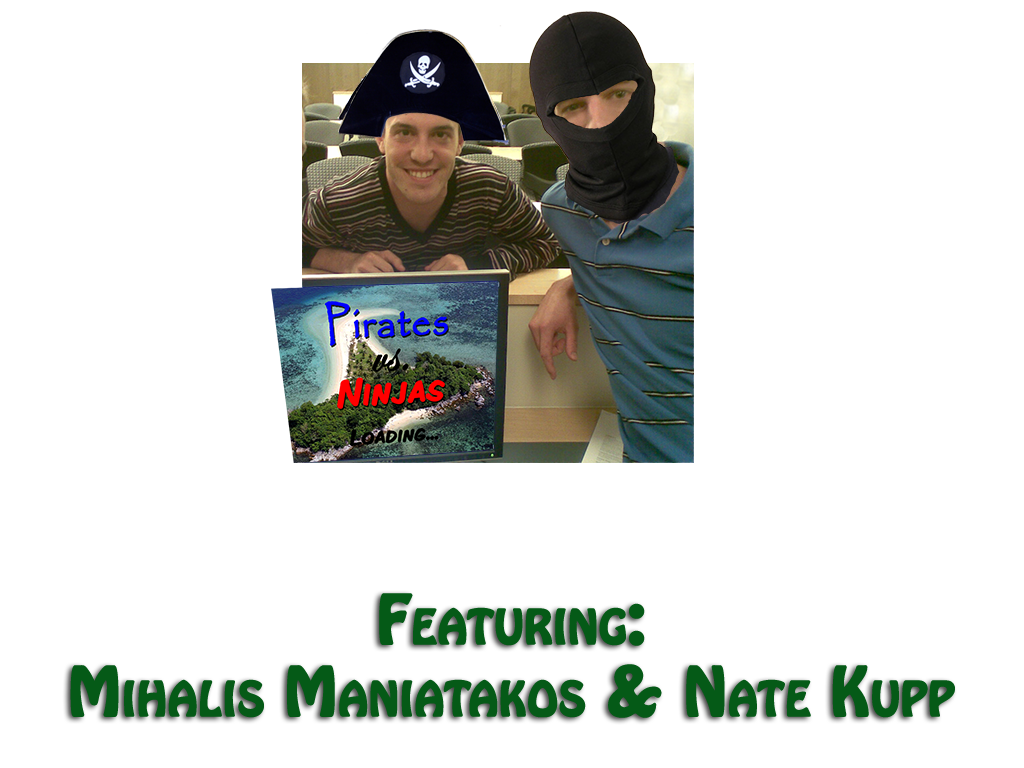
<style>
.page{position:relative;width:1024px;height:768px;background:#ffffff}
.page>*{position:absolute;margin:0}
.t1{font:60px "HoboStd";color:#055a17;font-variant:small-caps;font-weight:bold}
</style>
<div class="page">
<p class="t1" style="left:70px;top:593px;width:885px;height:125px;text-align:center">Featuring:<br>Mihalis Maniatakos &amp; Nate Kupp</p>
</div>
